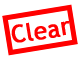
<style>
.page{position:relative;width:80px;height:60px;background:#ffffff}
.page>*{position:absolute;margin:0}
.t1{font:24px "TrebuchetMS";color:#ff0000;font-weight:bold}
</style>
<div class="page">
<p class="t1" style="left:11px;top:21px;width:59px;height:22px;rotate:-9deg">Clear</p>
</div>
